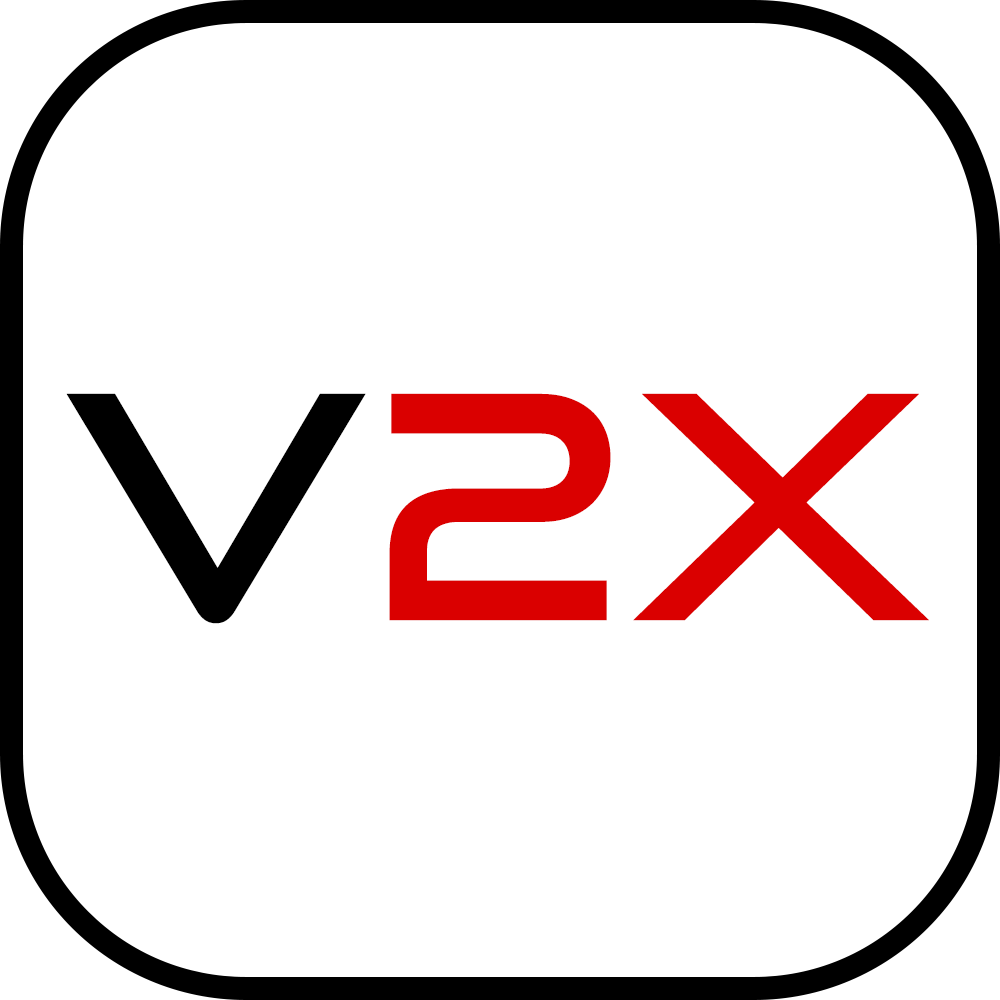
<style>
.page{position:relative;width:1000px;height:1000px;background:#ffffff}
.page>*{position:absolute;margin:0}
.t1{font:311px "GoodTimesRg-Regular";color:#da0000}
.t2{font:311px "GoodTimesRg-Regular";color:#000000}
</style>
<div class="page">
<p class="t1" style="left:66px;top:393px;width:863px;height:231px"><span class="t2">V</span>2X</p>
</div>
